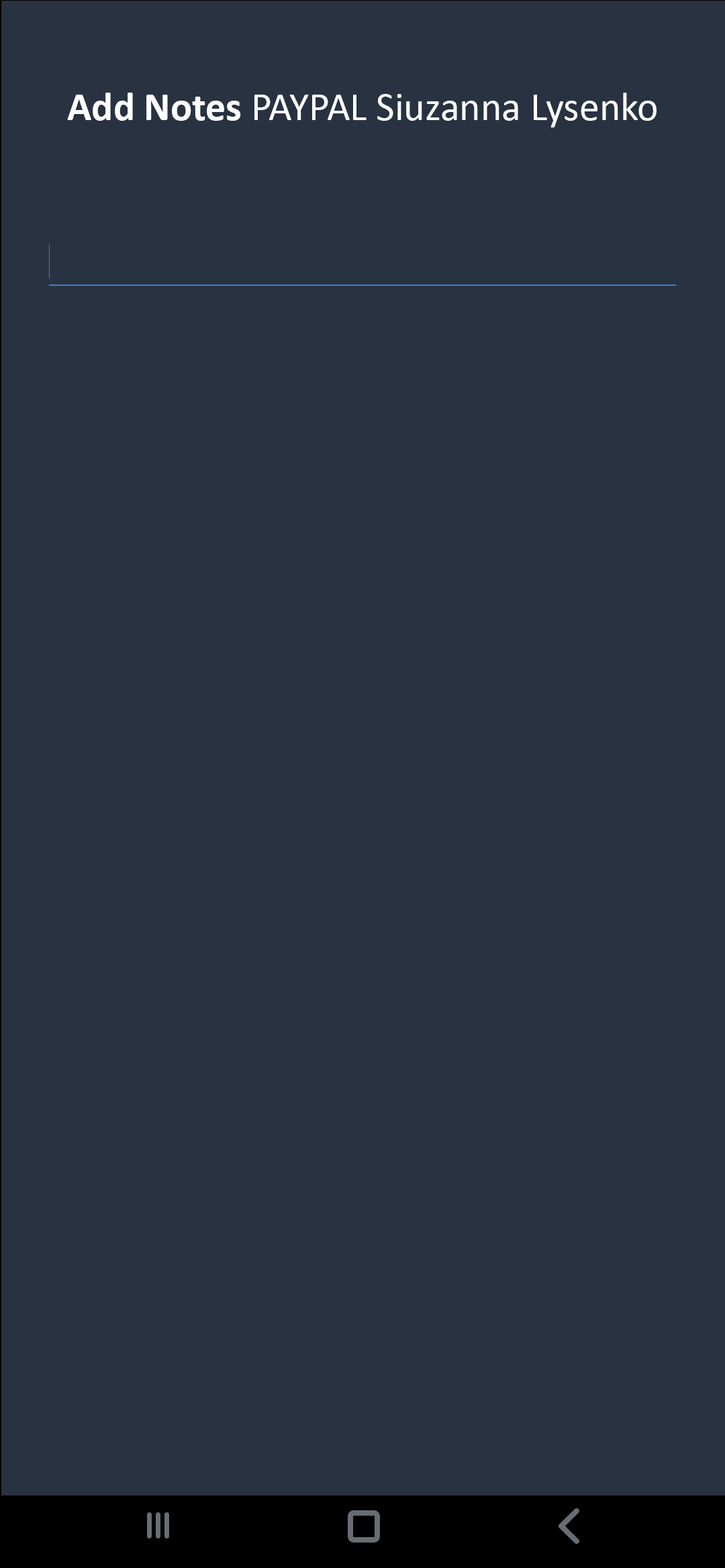
<style>
.page{position:relative;width:725px;height:1568px;background:#293241}
.page>*{position:absolute;margin:0}
.t1{font:40.3px "Calibri";color:#ffffff}
.t2{font:40.3px "Calibri-Bold";color:#ffffff}
</style>
<div class="page">
<p class="t1" style="left:67px;top:93px;width:589px;height:34px"><span class="t2">Add Notes </span>PAYPAL Siuzanna Lysenko</p>
</div>
